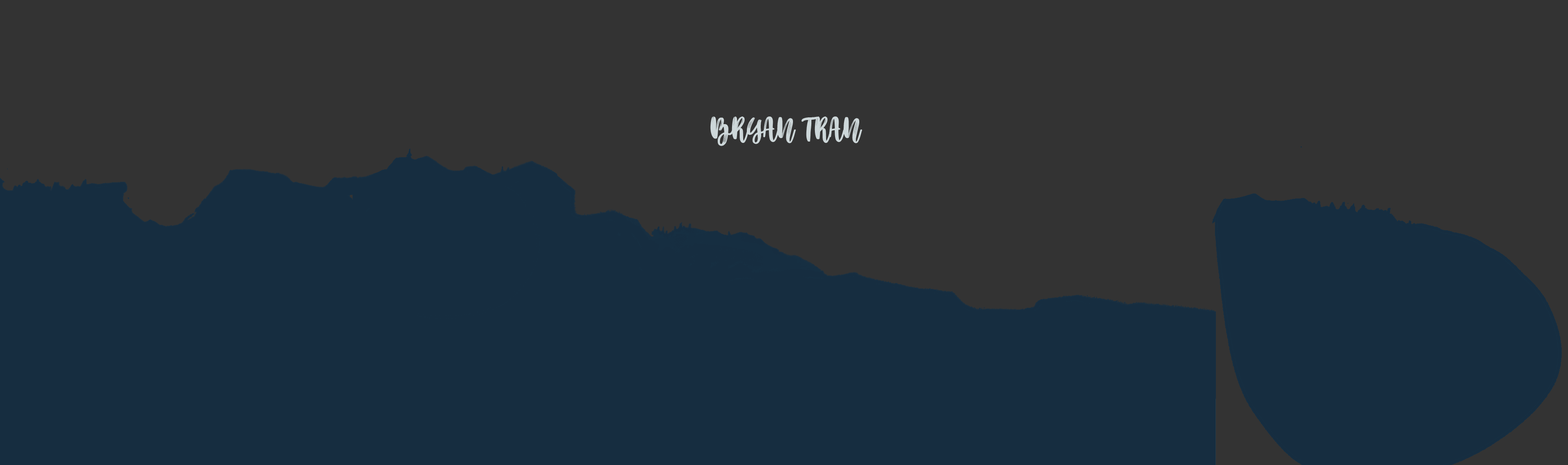
<style>
.page{position:relative;width:1568px;height:465px;background:#333333}
.page>*{position:absolute;margin:0}
.t1{font:40.3px "BetterTogether-Script";color:#cdd7d9}
</style>
<div class="page">
<p class="t1" style="left:710px;top:116px;width:152px;height:30px">BRYAN TRAN</p>
</div>
